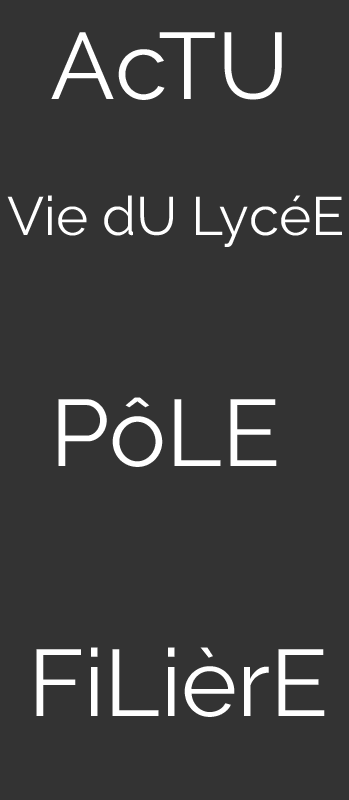
<style>
.page{position:relative;width:349px;height:800px;background:#333333}
.page>*{position:absolute;margin:0}
.t1{font:94.1px "Raleway";color:#ffffff}
.t2{font:54.1px "Raleway";color:#ffffff}
</style>
<div class="page">
<p class="t1" style="left:51px;top:32px;width:231px;height:68px">AcTU</p>
<p class="t2" style="left:7px;top:195px;width:335px;height:52px">Vie dU LycéE</p>
<p class="t1" style="left:58px;top:397px;width:219px;height:70px">PôLE</p>
<p class="t1" style="left:36px;top:647px;width:289px;height:70px">FiLièrE</p>
</div>
